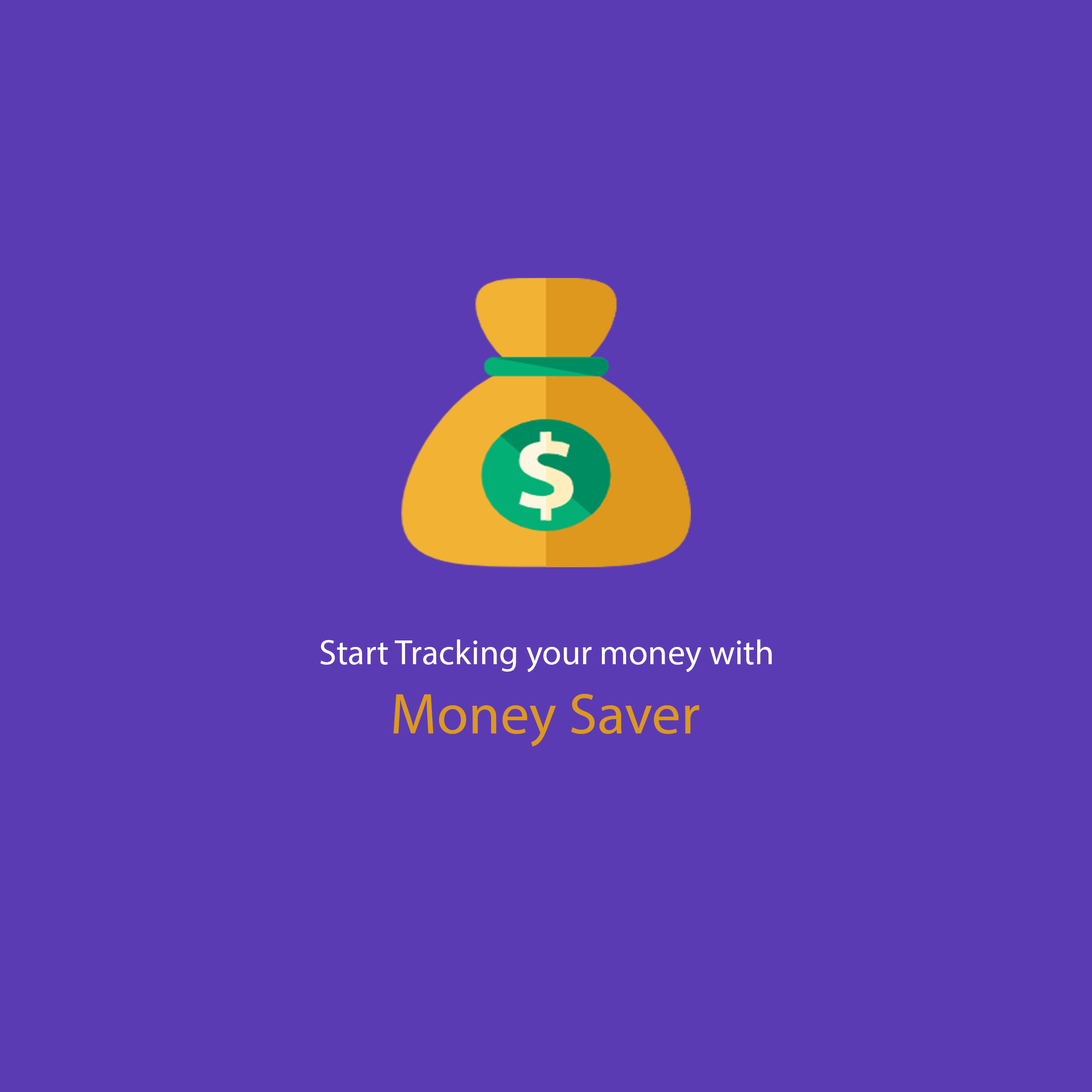
<style>
.page{position:relative;width:1092px;height:1092px;background:#5b3bb4}
.page>*{position:absolute;margin:0}
.t1{font:35px "MyriadPro-Regular";color:#ffffff}
.t2{font:57.7px "MyriadPro-Regular";color:#dd981d}
</style>
<div class="page">
<p class="t1" style="left:320px;top:639px;width:452px;height:33px">Start Tracking your money with</p>
<p class="t2" style="left:393px;top:693px;width:306px;height:54px">Money Saver</p>
</div>
